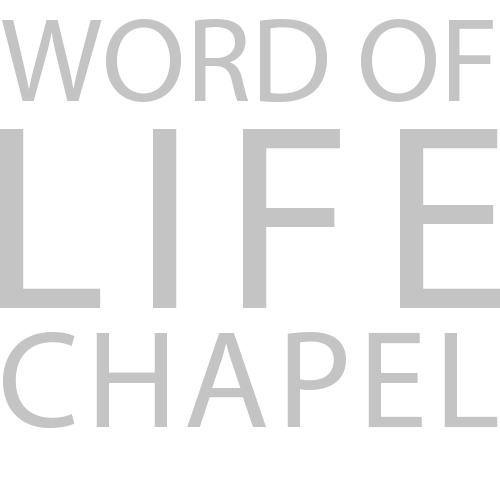
<style>
.page{position:relative;width:500px;height:500px;background:#ffffff}
.page>*{position:absolute;margin:0}
.t1{font:120.5px "MyriadPro-Regular";color:#c4c4c4}
.t2{font:264.9px "MyriadPro-Regular";letter-spacing:0.1em;color:#c4c4c4}
.t3{font:138.9px "MyriadPro-Regular";letter-spacing:0.05em;color:#c4c4c4}
</style>
<div class="page">
<p class="t1" style="left:2px;top:19px;width:491px;height:83px">WORD OF</p>
<p class="t2" style="left:0px;top:129px;width:502px;height:179px">LIFE</p>
<p class="t3" style="left:3px;top:331px;width:495px;height:98px">CHAPEL</p>
</div>
